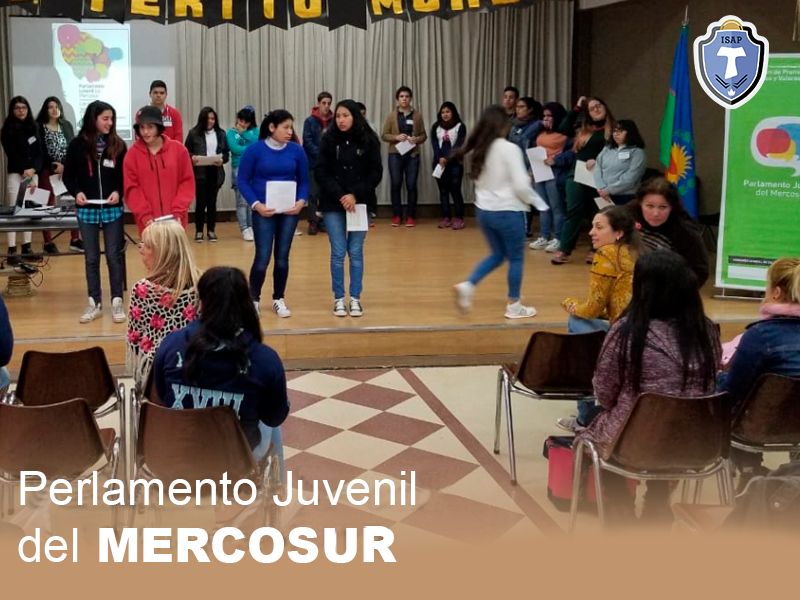
<style>
.page{position:relative;width:800px;height:600px}
.page>*{position:absolute;margin:0}
.t1{font:47.2px "ArialMT";color:#ffffff}
.t2{font:47.2px "Arial-Black";color:#ffffff}
</style>
<div class="page">
<p class="t1" style="left:18px;top:471px;width:398px;height:92px">Perlamento Juvenil<br>del<span class="t2"> MERCOSUR</span></p>
</div>
